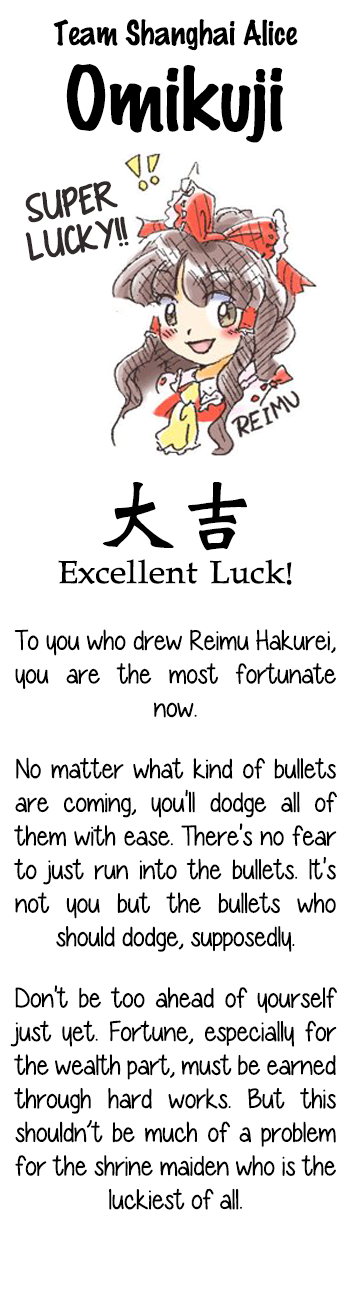
<style>
.page{position:relative;width:350px;height:1300px;background:#ffffff}
.page>*{position:absolute;margin:0}
.t1{font:30.4px "Felt-Regular";color:#000000}
.t2{font:79.3px "Felt-Regular";color:#000000}
.t3{font:35.7px/37.7px "MRFOatmealandRaisinsTwo-germod";color:#302a2a;text-transform:uppercase;font-weight:bold}
.t4{font:80px "DFGiHi-W7-WINP-RKSJ-H";color:#000000}
.t5{font:34.3px "DFGiHi-W7-WINP-RKSJ-H";color:#000000}
.t6{font:28px "Diamond-Girl";color:#000000}
</style>
<div class="page">
<p class="t1" style="left:53px;top:19px;width:245px;height:32px">Team Shanghai Alice</p>
<p class="t2" style="left:66px;top:64px;width:217px;height:79px">Omikuji</p>
<p class="t3" style="left:25px;top:181px;width:104px;height:80px;text-align:center;rotate:-9deg">Super<br>lucky!!</p>
<p class="t4" style="left:102px;top:482px;width:145px;height:69px">大吉</p>
<p class="t5" style="left:58px;top:559px;width:234px;height:26px">Excellent Luck!</p>
<p class="t6" style="left:10px;top:629px;width:327px;height:581px;text-align:justify">To you who drew Reimu Hakurei, you are the most fortunate now.<br><br>No matter what kind of bullets are coming, you'll dodge all of them with ease. There's no fear to just run into the bullets. It's not you but the bullets who should dodge, supposedly.<br><br>Don't be too ahead of yourself just yet. Fortune, especially for the wealth part, must be earned through hard works. But this shouldn’t be much of a problem for the shrine maiden who is the luckiest of all.</p>
</div>
